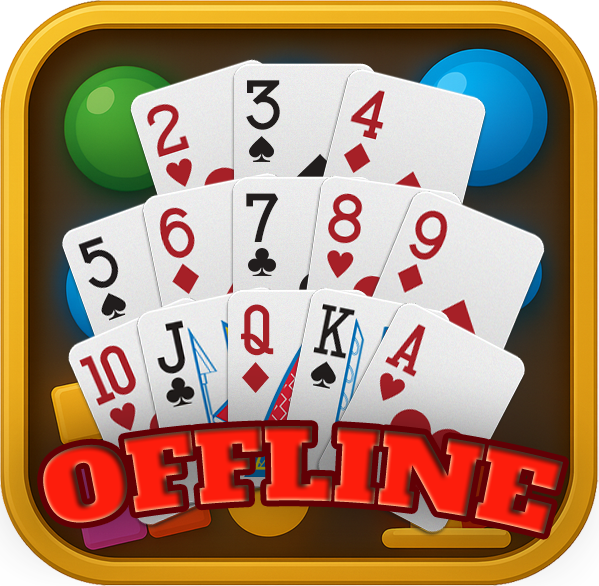
<style>
.page{position:relative;width:599px;height:586px}
.page>*{position:absolute;margin:0}
.t1{font:95px "AlfaSlabOne-Regular";color:#fd1d0c}
</style>
<div class="page">
<p class="t1" style="left:43px;top:426px;width:520px;height:108px;rotate:1deg">OFFLINE</p>
</div>
